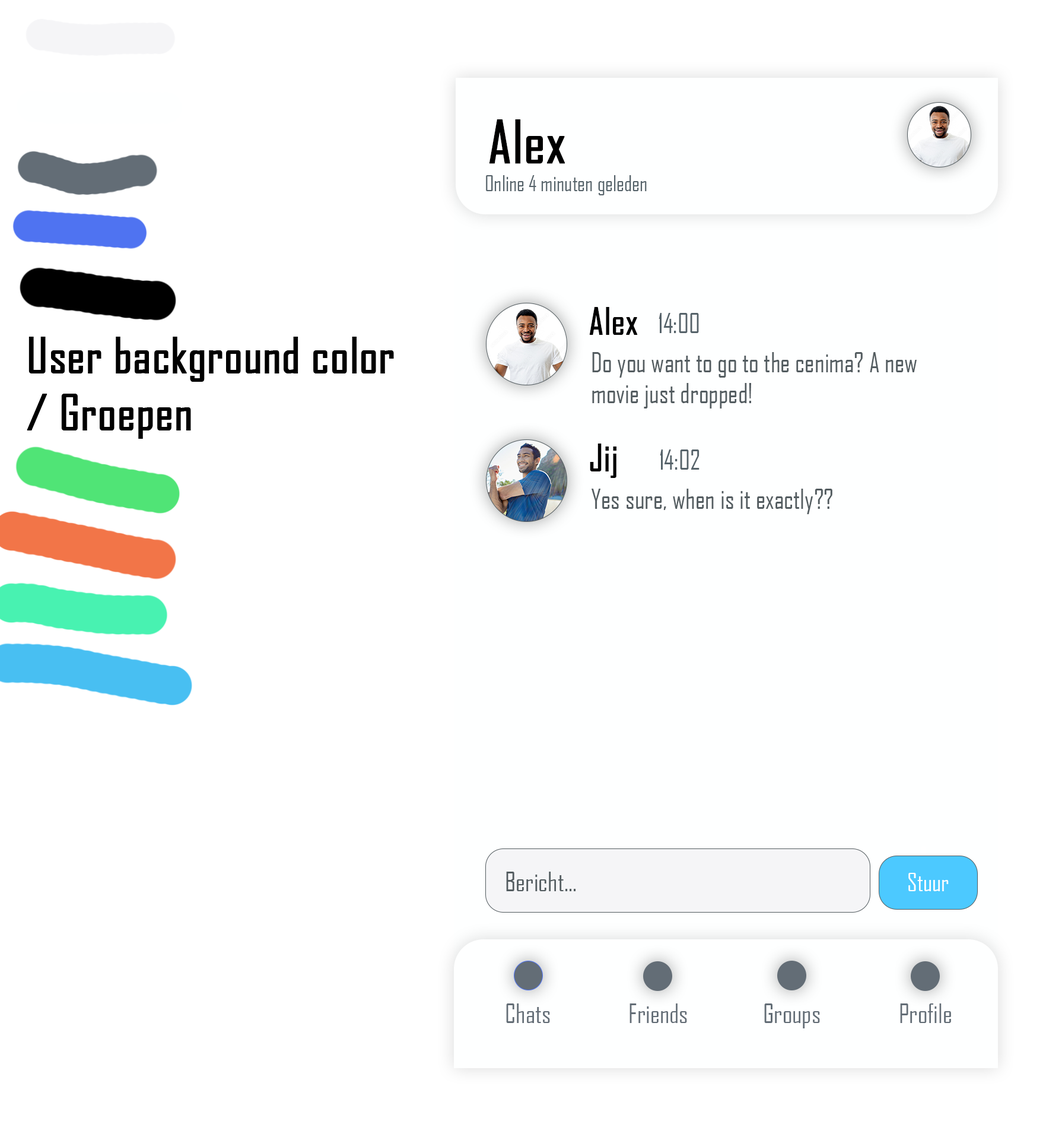
<style>
.page{position:relative;width:1046px;height:1140px;background:#ffffff}
.page>*{position:absolute;margin:0}
.t1{font:56.4px "AgencyFB-Reg";color:#000000;font-weight:bold}
.t2{font:20.8px "AgencyFB-Reg";color:#56636a}
.t3{font:35.6px "AgencyFB-Reg";color:#000000;font-weight:bold}
.t4{font:26.1px "AgencyFB-Reg";color:#56636a}
.t5{font:47.5px "AgencyFB-Reg";color:#000000;font-weight:bold}
.t6{font:26.1px "AgencyFB-Reg";color:#535c60}
.t7{font:25.7px "AgencyFB-Reg";color:#535c60}
.t8{font:24px "AgencyFB-Reg";color:#ffffff}
.t9{font:25.6px "AgencyFB-Reg";color:#636d76}
</style>
<div class="page">
<p class="t1" style="left:489px;top:119px;width:76px;height:45px">Alex</p>
<p class="t2" style="left:486px;top:175px;width:161px;height:20px">Online 4 minuten geleden</p>
<p class="t3" style="left:589px;top:307px;width:49px;height:28px">Alex</p>
<p class="t4" style="left:659px;top:313px;width:40px;height:20px">14:00</p>
<p class="t5" style="left:27px;top:337px;width:367px;height:102px">User background color<br>/ Groepen</p>
<p class="t6" style="left:592px;top:352px;width:325px;height:56px">Do you want to go to the cenima? A new<br>movie just dropped!</p>
<p class="t3" style="left:590px;top:443px;width:27px;height:35px">Jij</p>
<p class="t4" style="left:660px;top:449px;width:40px;height:20px">14:02</p>
<p class="t6" style="left:592px;top:488px;width:241px;height:26px">Yes sure, when is it exactly??</p>
<p class="t7" style="left:506px;top:871px;width:70px;height:20px">Bericht...</p>
<p class="t8" style="left:909px;top:872px;width:40px;height:19px">Stuur</p>
<p class="t9" style="left:506px;top:1003px;width:44px;height:20px">Chats</p>
<p class="t9" style="left:630px;top:1003px;width:57px;height:20px">Friends</p>
<p class="t9" style="left:764px;top:1003px;width:56px;height:25px">Groups</p>
<p class="t9" style="left:900px;top:1003px;width:51px;height:20px">Profile</p>
</div>
